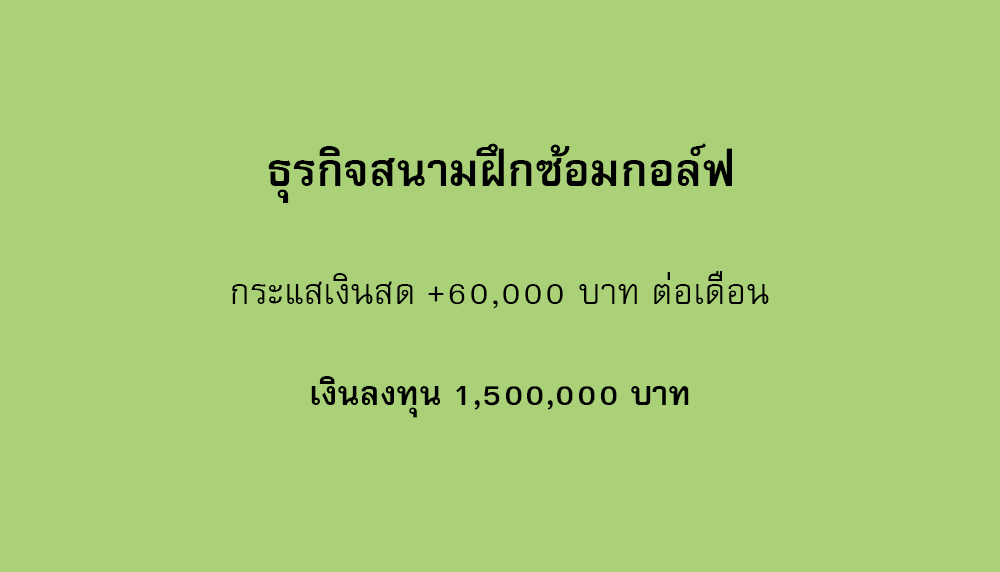
<style>
.page{position:relative;width:1000px;height:572px;background:#aad178}
.page>*{position:absolute;margin:0}
.t1{font:64px "FreesiaUPCBold";color:#000000}
.t2{font:50px "FreesiaUPC";color:#000000}
.t3{font:47px "FreesiaUPCBold";color:#000000}
</style>
<div class="page">
<p class="t1" style="left:268px;top:143px;width:464px;height:60px">ธุรกิจสนามฝึกซ้อมกอล์ฟ</p>
<p class="t2" style="left:232px;top:271px;width:537px;height:38px">กระแสเงินสด +60,000 บาท ต่อเดือน</p>
<p class="t3" style="left:311px;top:376px;width:378px;height:42px">เงินลงทุน 1,500,000 บาท</p>
</div>
